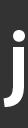
<style>
.page{position:relative;width:28px;height:128px;background:#333333}
.page>*{position:absolute;margin:0}
.t1{font:75px "AdobeGothicStd-Bold";color:#ffffff}
</style>
<div class="page">
<p class="t1" style="left:3px;top:30px;width:22px;height:77px">j</p>
</div>
